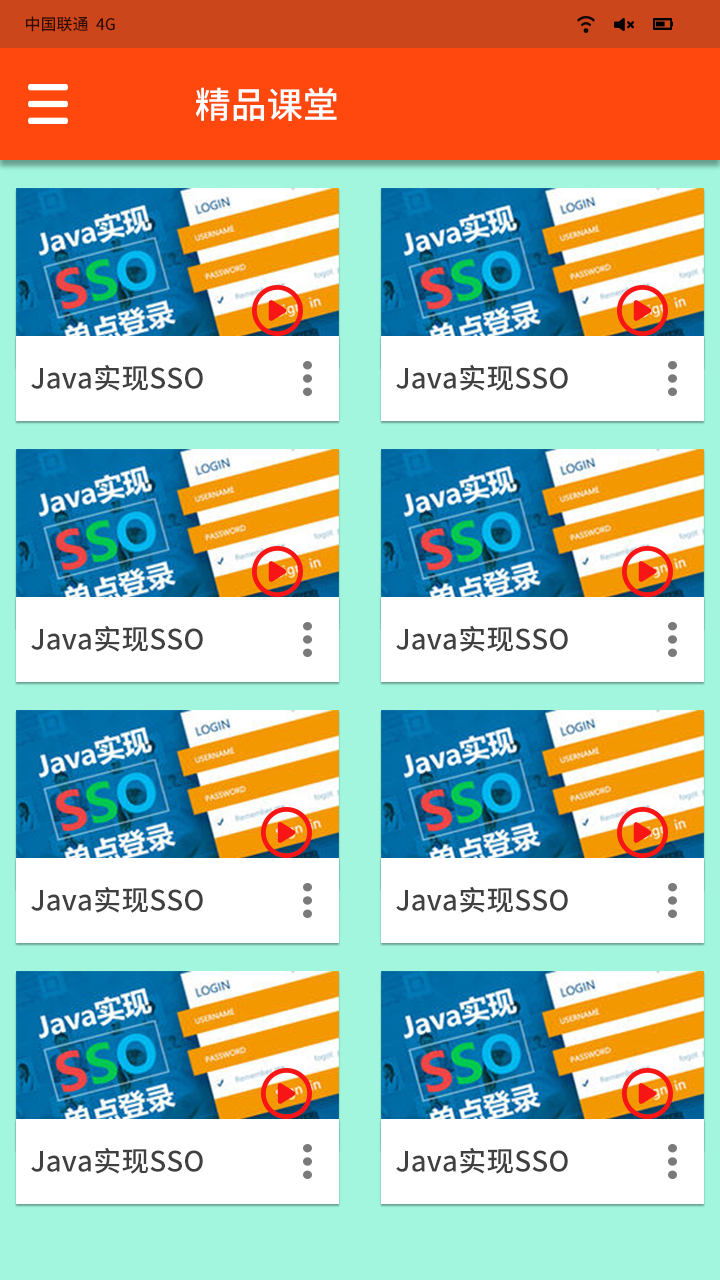
<style>
.page{position:relative;width:720px;height:1280px;background:#ffffff}
.page>*{position:absolute;margin:0}
.t1{font:16px "SourceHanSansCN-Medium";color:#310a02}
.t2{font:36px "SourceHanSansCN-Medium";color:#ffffff}
.t3{font:28px "SourceHanSansCN-Medium";color:#404040}
</style>
<div class="page">
<p class="t1" style="left:26px;top:16px;width:89px;height:16px">中国联通  4G</p>
<p class="t2" style="left:195px;top:87px;width:142px;height:34px">精品课堂</p>
<p class="t3" style="left:31px;top:364px;width:172px;height:27px">Java实现SSO</p>
<p class="t3" style="left:396px;top:364px;width:172px;height:27px">Java实现SSO</p>
<p class="t3" style="left:31px;top:625px;width:172px;height:27px">Java实现SSO</p>
<p class="t3" style="left:396px;top:625px;width:172px;height:27px">Java实现SSO</p>
<p class="t3" style="left:31px;top:886px;width:172px;height:27px">Java实现SSO</p>
<p class="t3" style="left:396px;top:886px;width:172px;height:27px">Java实现SSO</p>
<p class="t3" style="left:31px;top:1147px;width:172px;height:27px">Java实现SSO</p>
<p class="t3" style="left:396px;top:1147px;width:172px;height:27px">Java实现SSO</p>
</div>
